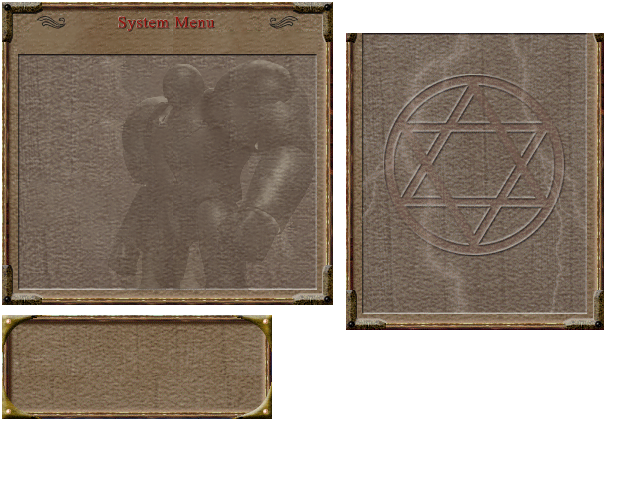
<style>
.page{position:relative;width:640px;height:480px;background:#ffffff}
.page>*{position:absolute;margin:0}
.t1{font:16px "TimesNewRomanPSMT";letter-spacing:0.05em;color:#941810}
.t2{font:16.6px "TimesNewRomanPSMT";letter-spacing:0.05em}
</style>
<div class="page">
<p class="t1" style="left:118px;top:16px;width:97px;height:15px">System Menu</p>
<p class="t2" style="left:118px;top:15px;width:97px;height:16px">System Menu</p>
</div>
